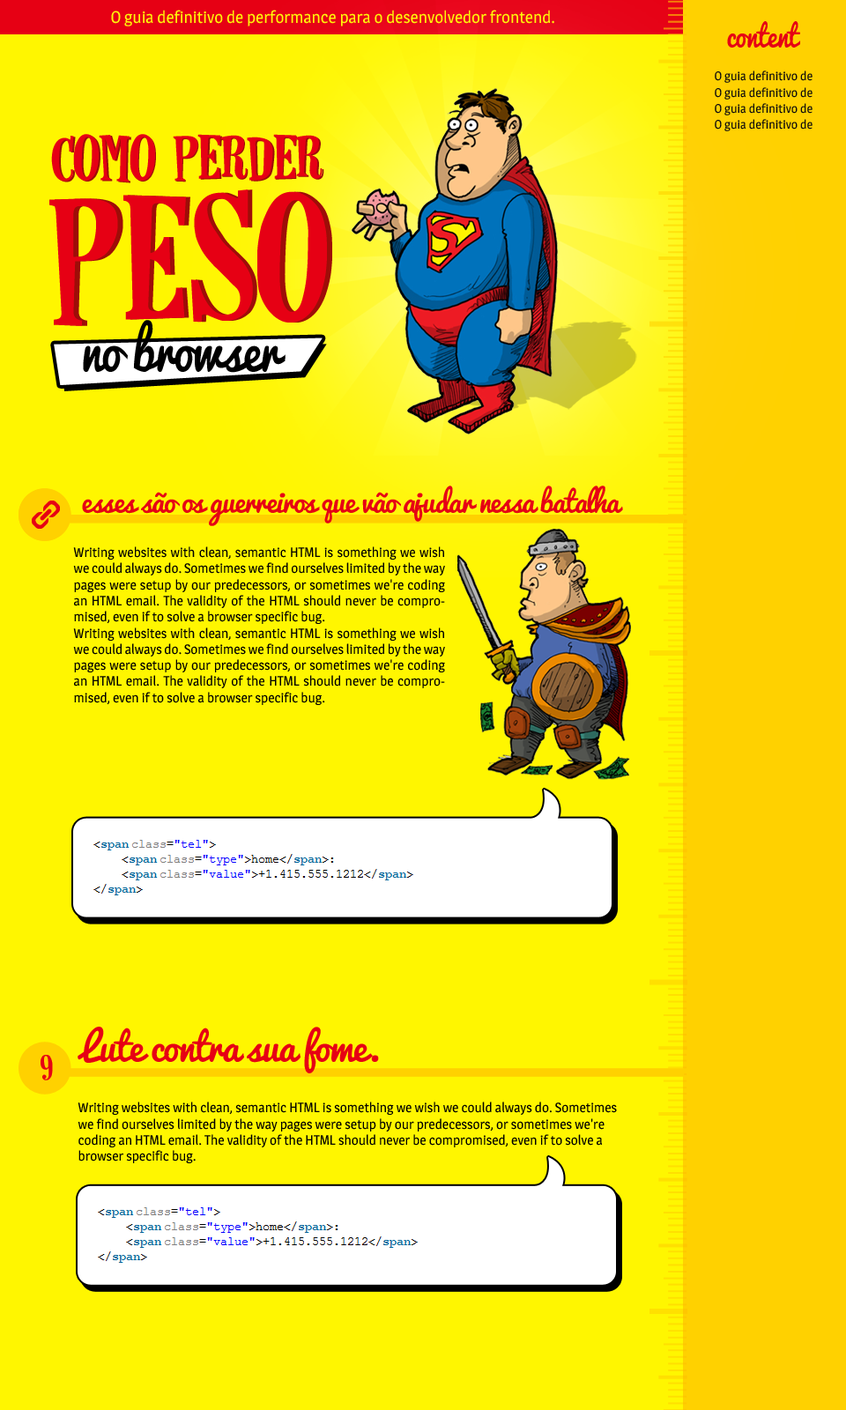
<style>
.page{position:relative;width:846px;height:1410px;background:#fff600}
.page>*{position:absolute;margin:0}
.t1{font:16.7px "Magra";color:#fff609}
.t2{font:30.1px "Pacifico-Regular";letter-spacing:-0.02em;color:#e60014;scale:0.87 1}
.t3{font:12.4px "Magra";color:#0f0d0d}
.t4{font:63.6px "Horseshoes";letter-spacing:-0.04em;color:#e60014}
.t5{font:179.1px "Horseshoes";letter-spacing:-0.02em;color:#e60014}
.t6{font:55.3px "Pacifico-Regular";letter-spacing:-0.02em;color:#000000;scale:0.87 1}
.t7{font:28.8px "Pacifico-Regular";letter-spacing:-0.04em;color:#e60014}
.t8{font:13.4px "Magra";color:#000000}
.t9{font:38.6px "Pacifico-Regular";letter-spacing:-0.04em;color:#e60014}
.t10{font:35.8px "Horseshoes";letter-spacing:-0.04em;color:#e60014}
</style>
<div class="page">
<p class="t1" style="left:111px;top:10px;width:443px;height:16px">O guia definitivo de performance para o desenvolvedor frontend.</p>
<p class="t2" style="left:727px;top:21px;width:73px;height:27px">content</p>
<p class="t3" style="left:715px;top:70px;width:97px;height:13px">O guia definitivo de</p>
<p class="t3" style="left:715px;top:87px;width:97px;height:13px">O guia definitivo de</p>
<p class="t3" style="left:715px;top:103px;width:97px;height:12px">O guia definitivo de</p>
<p class="t3" style="left:715px;top:119px;width:97px;height:12px">O guia definitivo de</p>
<p class="t4" style="left:51px;top:134px;width:104px;height:48px">como</p>
<p class="t4" style="left:53px;top:135px;width:103px;height:48px">como</p>
<p class="t4" style="left:173px;top:134px;width:149px;height:48px">perder</p>
<p class="t4" style="left:174px;top:135px;width:150px;height:47px">perder</p>
<p class="t5" style="left:49px;top:189px;width:278px;height:137px">peso</p>
<p class="t5" style="left:55px;top:189px;width:277px;height:137px">peso</p>
<p class="t6" style="left:83px;top:320px;width:202px;height:53px">no browser</p>
<p class="t7" style="left:82px;top:485px;width:541px;height:41px">esses são os guerreiros que vão ajudar nessa batalha</p>
<p class="t8" style="left:73px;top:546px;width:372px;height:159px;text-align:justify">Writing websites with clean, semantic HTML is something we wish we could always do. Sometimes we find ourselves limited by the way pages were setup by our predecessors, or sometimes we're coding an HTML email. The validity of the HTML should never be compromised, even if to solve a browser specific bug.<br>Writing websites with clean, semantic HTML is something we wish we could always do. Sometimes we find ourselves limited by the way pages were setup by our predecessors, or sometimes we're coding an HTML email. The validity of the HTML should never be compromised, even if to solve a browser specific bug.</p>
<p class="t9" style="left:78px;top:1026px;width:301px;height:47px">Lute contra sua fome.</p>
<p class="t10" style="left:41px;top:1055px;width:12px;height:25px">9</p>
<p class="t8" style="left:78px;top:1101px;width:539px;height:62px">Writing websites with clean, semantic HTML is something we wish we could always do. Sometimes we find ourselves limited by the way pages were setup by our predecessors, or sometimes we're coding an HTML email. The validity of the HTML should never be compromised, even if to solve a browser specific bug.</p>
</div>
